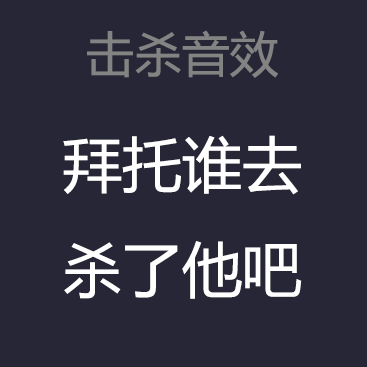
<style>
.page{position:relative;width:367px;height:367px;background:#272636}
.page>*{position:absolute;margin:0}
.t1{font:48px "MicrosoftYaHei";color:#838383}
.t2{font:60px "MicrosoftYaHei";color:#ffffff}
</style>
<div class="page">
<p class="t1" style="left:87px;top:30px;width:191px;height:48px">击杀音效</p>
<p class="t2" style="left:63px;top:135px;width:239px;height:164px">拜托谁去<br>杀了他吧</p>
</div>
